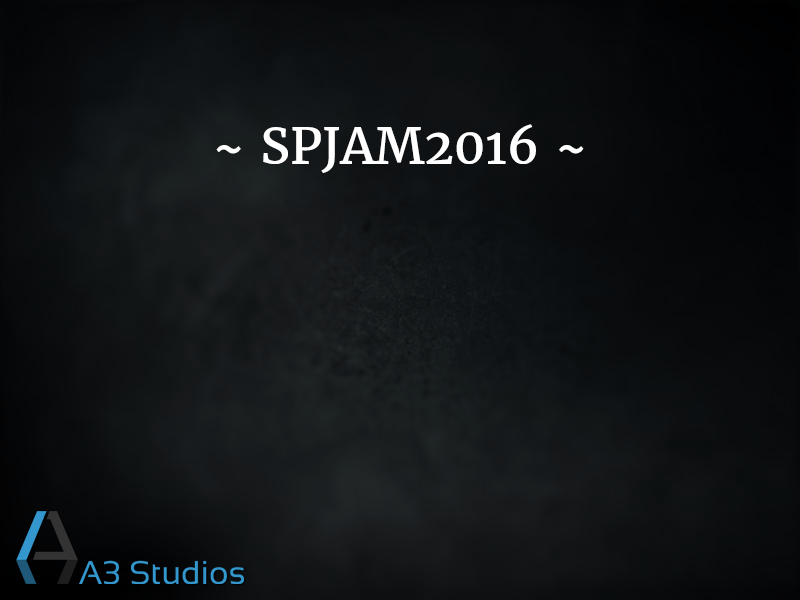
<style>
.page{position:relative;width:800px;height:600px}
.page>*{position:absolute;margin:0}
.t1{font:49.4px "Merriweather-Regular";color:#ffffff}
</style>
<div class="page">
<p class="t1" style="left:216px;top:124px;width:368px;height:49px">~ SPJAM2016 ~</p>
</div>
